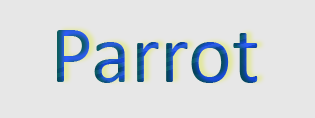
<style>
.page{position:relative;width:315px;height:118px;background:#e7e7e7}
.page>*{position:absolute;margin:0}
.t1{font:83.3px "Calibri";color:#e8e8e8}
</style>
<div class="page">
<p class="t1" style="left:57px;top:30px;width:201px;height:53px">Parrot</p>
</div>
